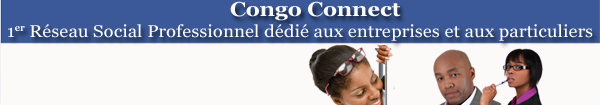
<style>
.page{position:relative;width:600px;height:105px;background:#fcf9f9}
.page>*{position:absolute;margin:0}
.t1{font:20px "Georgia-Bold";color:#faf9fb;scale:1.1 1}
.t2{font:17px "Georgia";color:#faf9fb;scale:1.1 1}
</style>
<div class="page">
<p class="t1" style="left:230px;top:1px;width:171px;height:20px">Congo Connect</p>
<p class="t2" style="left:8px;top:24px;width:585px;height:17px">1er Réseau Social Professionnel dédié aux entreprises et aux particuliers</p>
</div>
